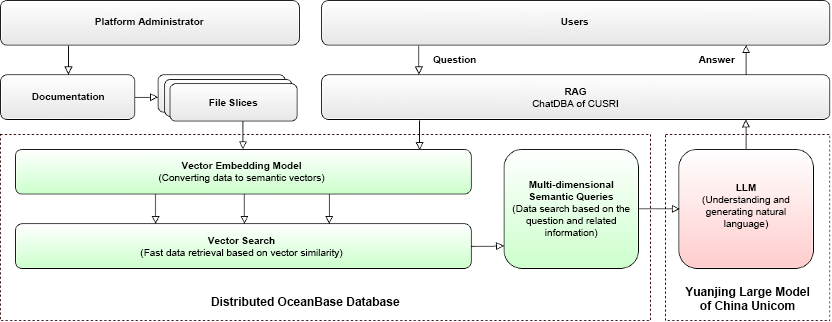
<style>
.page{position:relative;width:832px;height:322px;background:#ffffff}
.page>*{position:absolute;margin:0}
.t1{font:10px "Arial-BoldMT";color:#000000}
.t2{font:10px/12px "ArialMT";color:#000000}
.t3{font:10px/12px "Arial-BoldMT";color:#000000}
.t4{font:12px/14px "Arial-BoldMT";color:#000000}
.t5{font:12px "Arial-BoldMT";color:#000000}
</style>
<div class="page">
<p class="t1" style="left:95px;top:18px;width:109px;height:7px">Platform Administrator</p>
<p class="t1" style="left:561px;top:18px;width:28px;height:7px">Users</p>
<p class="t1" style="left:433px;top:56px;width:43px;height:8px">Question</p>
<p class="t1" style="left:698px;top:56px;width:37px;height:7px">Answer</p>
<p class="t2" style="left:532px;top:88px;width:86px;height:19px;text-align:center"><span class="t3">RAG<br></span>ChatDBA of CUSRI</p>
<p class="t1" style="left:32px;top:93px;width:72px;height:7px">Documentation</p>
<p class="t1" style="left:209px;top:99px;width:49px;height:7px">File Slices</p>
<p class="t2" style="left:159px;top:162px;width:166px;height:21px;text-align:center"><span class="t3">Vector Embedding Model<br></span>(Converting data to semantic vectors)</p>
<p class="t2" style="left:512px;top:181px;width:118px;height:57px;text-align:center"><span class="t3">Multi-dimensional Semantic Queries<br></span>(Data search based on the question and related information)</p>
<p class="t2" style="left:702px;top:184px;width:88px;height:45px;text-align:center"><span class="t3">LLM<br></span>(Understanding and generating natural language)</p>
<p class="t2" style="left:140px;top:237px;width:203px;height:21px;text-align:center"><span class="t3">Vector Search<br></span>(Fast data retrieval based on vector similarity)</p>
<p class="t4" style="left:685px;top:287px;width:125px;height:23px;text-align:center">Yuanjing Large Model of China Unicom</p>
<p class="t5" style="left:211px;top:297px;width:189px;height:9px">Distributed OceanBase Database</p>
</div>
